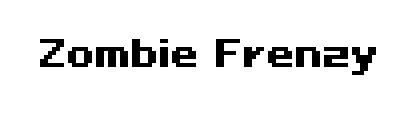
<style>
.page{position:relative;width:416px;height:114px;background:#ffffff}
.page>*{position:absolute;margin:0}
.t1{font:36px "PixeloidSans-Bold";color:#000000}
</style>
<div class="page">
<p class="t1" style="left:40px;top:39px;width:336px;height:36px">Zombie Frenzy</p>
</div>
